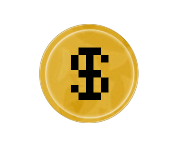
<style>
.page{position:relative;width:173px;height:149px;background:#ffffff}
.page>*{position:absolute;margin:0}
.t1{font:60px "pixelmix";color:#000000}
</style>
<div class="page">
<p class="t1" style="left:71px;top:47px;width:38px;height:53px">$</p>
</div>
